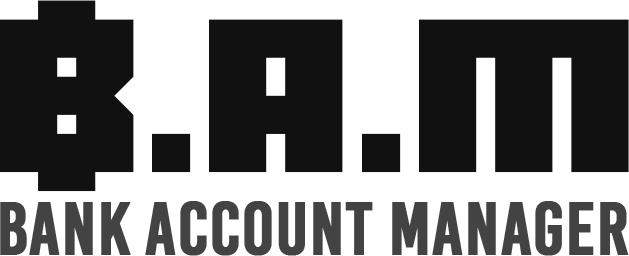
<style>
.page{position:relative;width:629px;height:256px;background:#111111}
.page>*{position:absolute;margin:0}
.t1{font:200px "Bankjob";color:#111111}
.t2{font:73.9px "BebasKai";color:#434343;font-weight:bold}
</style>
<div class="page">
<p class="t1" style="left:0px;top:0px;width:629px;height:192px">B.A.M</p>
<p class="t2" style="left:0px;top:201px;width:629px;height:55px">Bank Account Manager</p>
</div>
